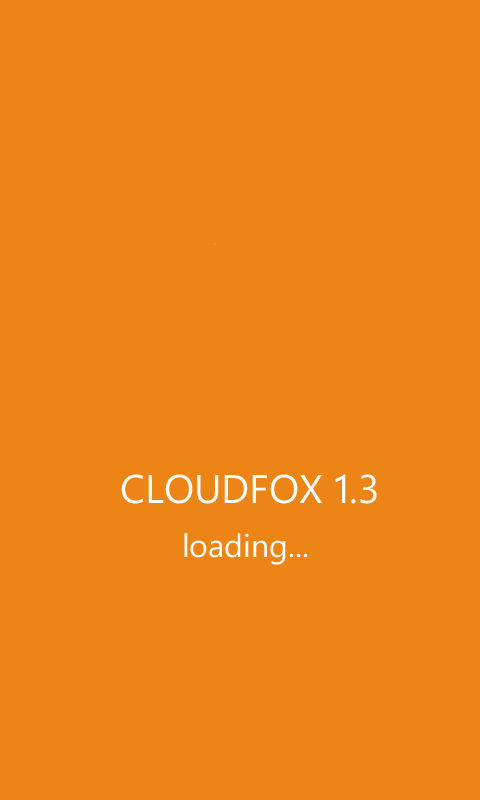
<style>
.page{position:relative;width:480px;height:800px;background:#ec8516}
.page>*{position:absolute;margin:0}
.t1{font:40px "SegoeWP";color:#fefeff}
.t2{font:32px "SegoeWP";color:#fefefe}
</style>
<div class="page">
<p class="t1" style="left:121px;top:474px;width:256px;height:30px">CLOUDFOX 1.3</p>
<p class="t2" style="left:184px;top:533px;width:124px;height:32px">loading...</p>
</div>
